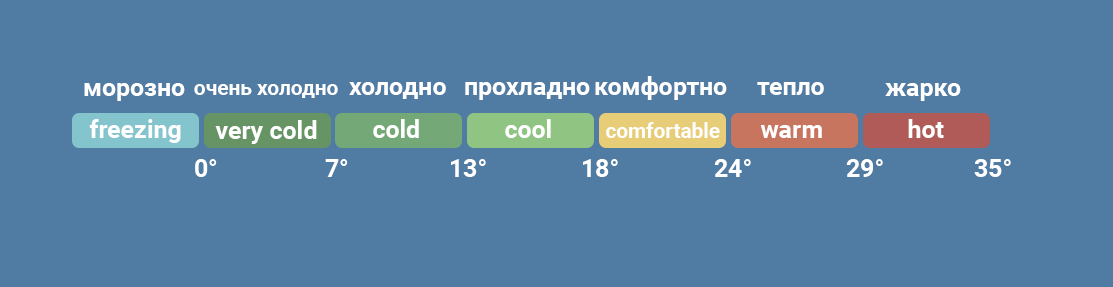
<style>
.page{position:relative;width:1113px;height:287px;background:#507ca4}
.page>*{position:absolute;margin:0}
.t1{font:25px "Roboto-Bold";color:#ffffff}
.t2{font:20.8px "Roboto-Bold";color:#ffffff}
</style>
<div class="page">
<p class="t1" style="left:595px;top:76px;width:132px;height:24px">комфортно</p>
<p class="t1" style="left:84px;top:83px;width:101px;height:18px">морозно</p>
<p class="t2" style="left:194px;top:84px;width:144px;height:14px">очень холодно</p>
<p class="t1" style="left:349px;top:82px;width:97px;height:17px">холодно</p>
<p class="t1" style="left:465px;top:82px;width:125px;height:18px">прохладно</p>
<p class="t1" style="left:757px;top:82px;width:67px;height:13px">тепло</p>
<p class="t1" style="left:885px;top:83px;width:76px;height:18px">жарко</p>
<p class="t1" style="left:89px;top:119px;width:92px;height:24px">freezing</p>
<p class="t1" style="left:215px;top:120px;width:102px;height:24px">very cold</p>
<p class="t1" style="left:373px;top:119px;width:46px;height:19px">cold</p>
<p class="t1" style="left:505px;top:119px;width:46px;height:19px">cool</p>
<p class="t2" style="left:606px;top:122px;width:114px;height:16px">comfortable</p>
<p class="t1" style="left:760px;top:125px;width:62px;height:13px">warm</p>
<p class="t1" style="left:908px;top:119px;width:36px;height:19px">hot</p>
<p class="t1" style="left:195px;top:159px;width:22px;height:18px">0°</p>
<p class="t1" style="left:325px;top:159px;width:23px;height:18px">7°</p>
<p class="t1" style="left:451px;top:159px;width:35px;height:18px">13°</p>
<p class="t1" style="left:583px;top:159px;width:35px;height:18px">18°</p>
<p class="t1" style="left:714px;top:159px;width:37px;height:18px">24°</p>
<p class="t1" style="left:846px;top:159px;width:37px;height:18px">29°</p>
<p class="t1" style="left:974px;top:159px;width:37px;height:18px">35°</p>
</div>
